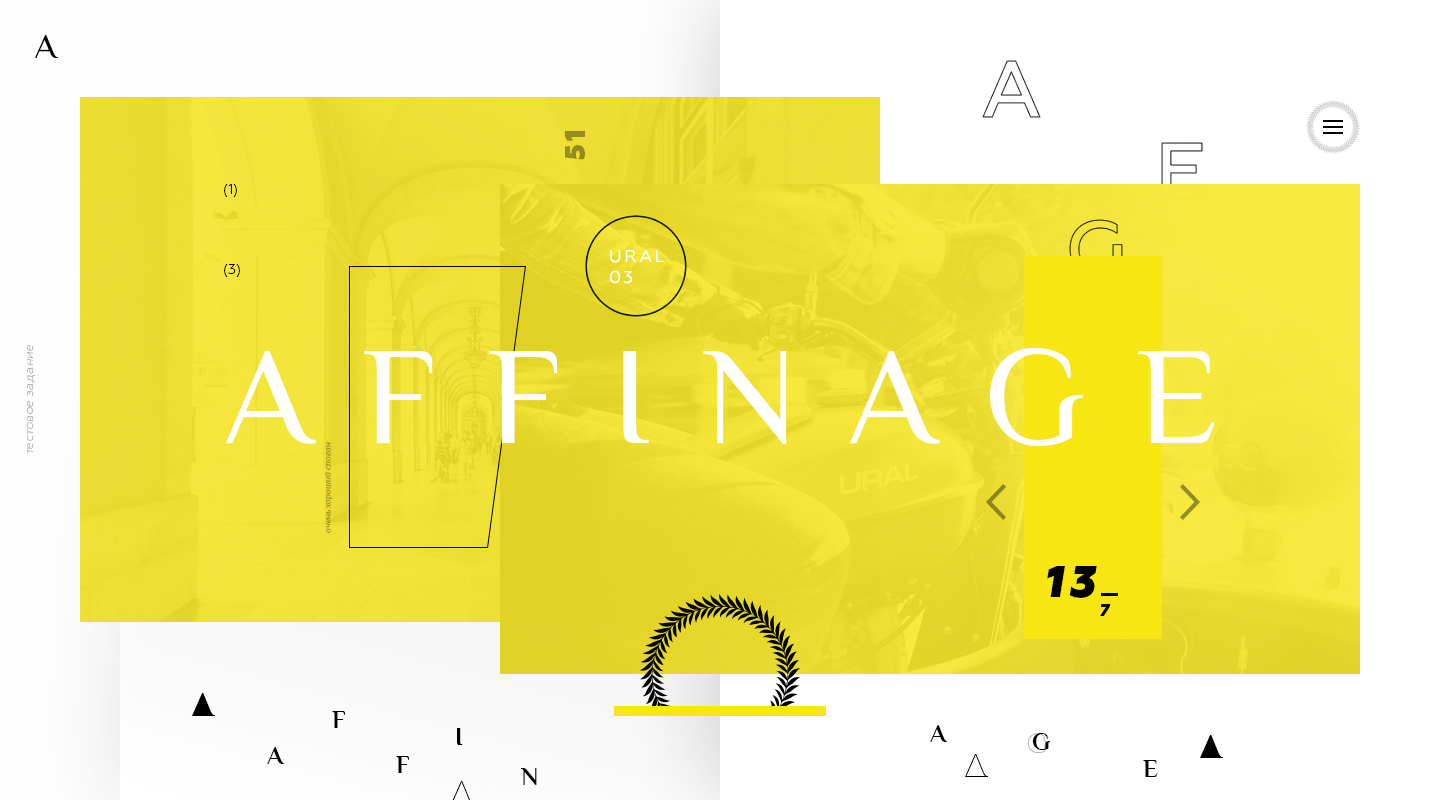
<style>
.page{position:relative;width:1440px;height:800px;background:#ffffff}
.page>*{position:absolute;margin:0}
.t1{font:28px "Geometria-Heavy";letter-spacing:0.1em;color:#958d1d}
.t2{font:14px "Geometria-Light";color:#000000}
.t3{font:17px/20.9px "Geometria";letter-spacing:0.126em;color:#ffffff}
.t4{font:12px "Geometria-LightItalic";letter-spacing:0.037em;color:#b7b7b7}
.t5{font:140px "Philosopher";letter-spacing:0.36em;color:#ffffff}
.t6{font:9px "Philosopher-Italic"}
.t7{font:45px "Geometria-HeavyItalic";letter-spacing:0.1em;color:#000000}
.t8{font:17px "Geometria-HeavyItalic";letter-spacing:0.1em;color:#000000}
.t9{font:25px "Philosopher-Bold";color:#000000}
</style>
<div class="page">
<p class="t1" style="left:565px;top:131px;width:20px;height:29px;rotate:-90deg">51</p>
<p class="t2" style="left:224px;top:184px;width:13px;height:13px">(1)</p>
<p class="t3" style="left:610px;top:250px;width:55px;height:34px">URAL<br>03</p>
<p class="t2" style="left:224px;top:264px;width:16px;height:13px">(3)</p>
<p class="t4" style="left:26px;top:345px;width:9px;height:109px;rotate:-90deg">тестовое задание</p>
<p class="t5" style="left:226px;top:348px;width:989px;height:98px">AFFINAGE</p>
<p class="t6" style="left:324px;top:442px;width:9px;height:91px;rotate:-90deg">очень хороший слоган</p>
<p class="t7" style="left:1047px;top:566px;width:50px;height:32px">13</p>
<p class="t8" style="left:1100px;top:604px;width:11px;height:12px">7</p>
<p class="t9" style="left:332px;top:711px;width:13px;height:17px">F</p>
<p class="t9" style="left:930px;top:725px;width:17px;height:17px">A</p>
<p class="t9" style="left:457px;top:728px;width:6px;height:17px">I</p>
<p class="t9" style="left:1032px;top:733px;width:19px;height:17px">G</p>
<p class="t9" style="left:267px;top:747px;width:17px;height:17px">A</p>
<p class="t9" style="left:396px;top:756px;width:13px;height:17px">F</p>
<p class="t9" style="left:1143px;top:760px;width:15px;height:17px">E</p>
<p class="t9" style="left:521px;top:768px;width:16px;height:17px">N</p>
</div>
